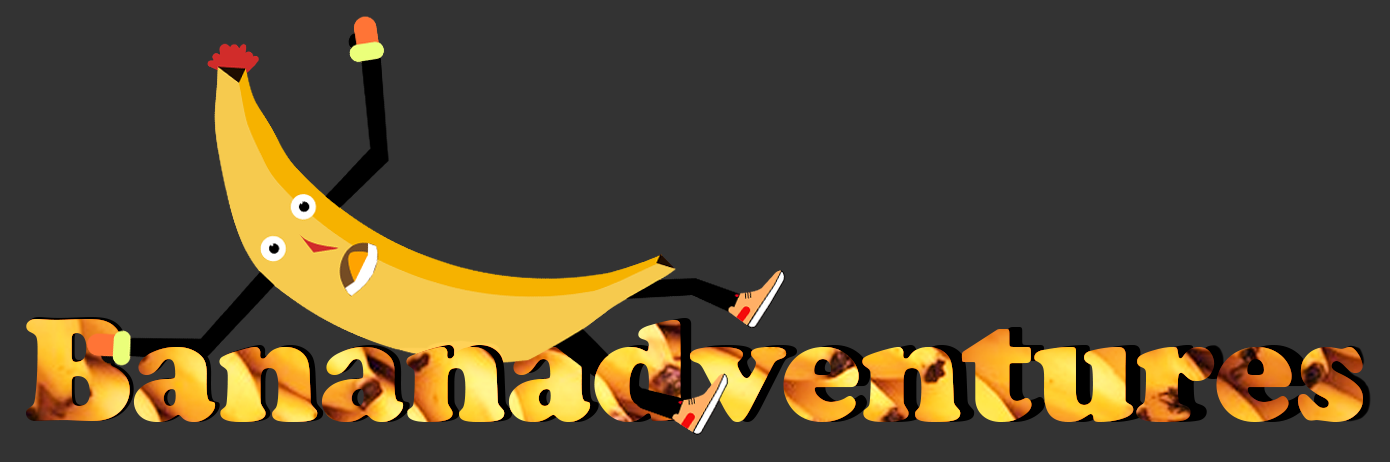
<style>
.page{position:relative;width:1390px;height:462px;background:#333333}
.page>*{position:absolute;margin:0}
.t1{font:150px "CooperBlack";letter-spacing:0.005em}
</style>
<div class="page">
<p class="t1" style="left:26px;top:319px;width:1337px;height:103px">Bananadventures</p>
</div>
